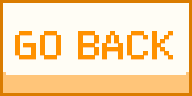
<style>
.page{position:relative;width:192px;height:96px;background:#fffdf5}
.page>*{position:absolute;margin:0}
.t1{font:36px "PixeloidSans";color:#ff9100;font-weight:bold}
</style>
<div class="page">
<p class="t1" style="left:15px;top:31px;width:158px;height:29px">GO BACK</p>
</div>
